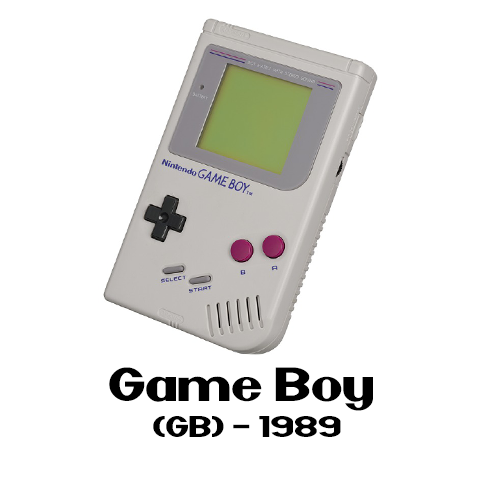
<style>
.page{position:relative;width:480px;height:480px;background:#ffffff}
.page>*{position:absolute;margin:0}
.t1{font:30px "Nintender";color:#000000}
.t2{font:48px "Nintender";color:#000000}
</style>
<div class="page">
<p class="t1" style="left:109px;top:367px;width:264px;height:70px;text-align:center"><span class="t2">Game Boy <br></span>(GB) - 1989</p>
</div>
